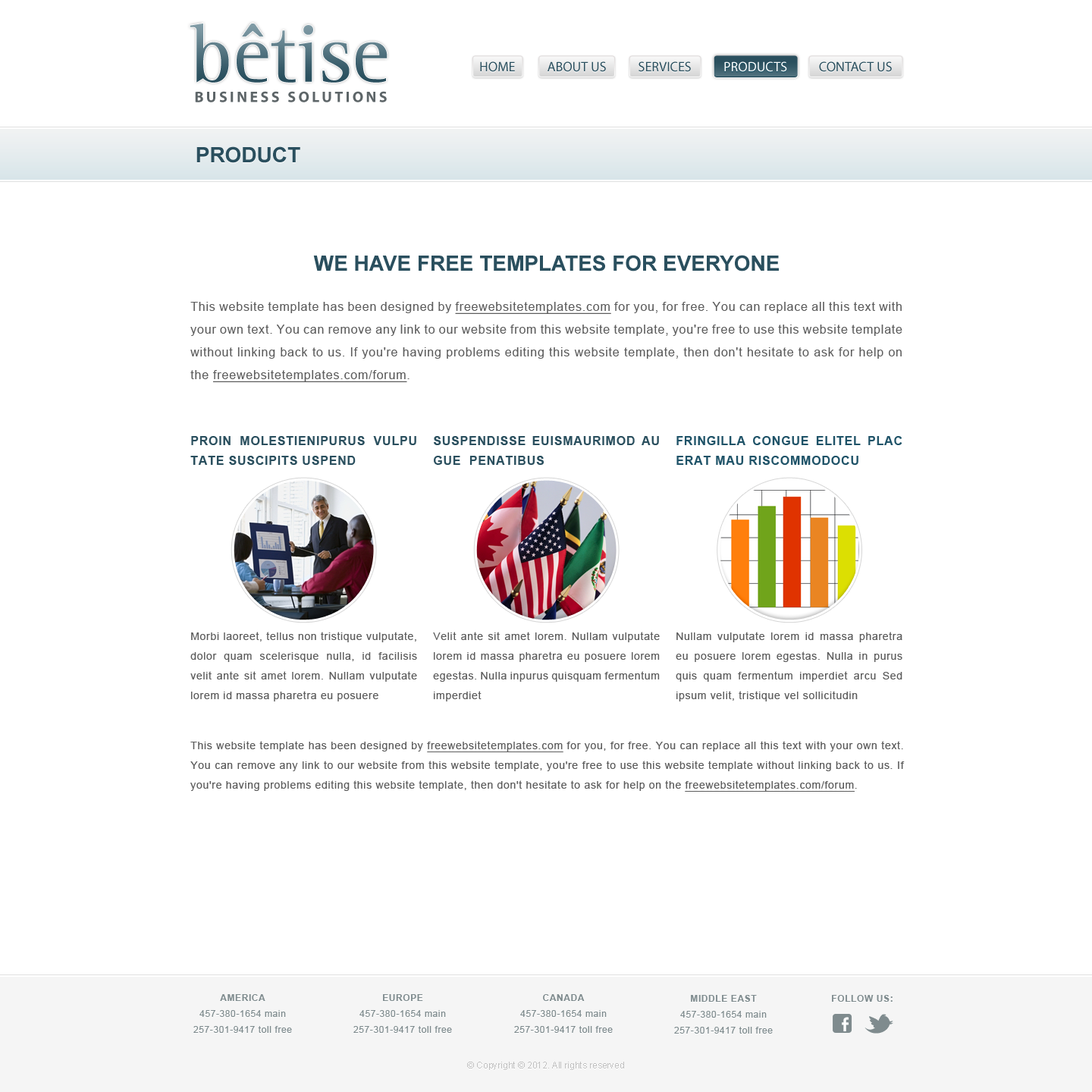
<style>
.page{position:relative;width:1092px;height:1092px;background:#ffffff}
.page>*{position:absolute;margin:0}
.t1{font:83.4px "LeftistMonoSerif"}
.t2{font:13.6px "MyriadPro-Regular";color:#2a4f5e}
.t3{font:13.6px "MyriadPro-Regular";color:#ffffff}
.t4{font:15.2px "MyriadPro-Bold";letter-spacing:0.17em;color:#5d6568;text-transform:uppercase}
.t5{font:21.2px "Arial-BoldMT";color:#2a4f5e;text-transform:uppercase}
.t6{font:12.1px/22.7px "ArialMT";letter-spacing:0.05em;color:#5d5d5d}
.t7{font:12.1px/22.7px "ArialMT";letter-spacing:0.05em;color:#5d5d5d;text-decoration:underline}
.t8{font:10.6px/19.7px "ArialMT";letter-spacing:0.05em;color:#5d5d5d}
.t9{font:12.1px/19.7px "Arial-BoldMT";letter-spacing:0.05em;color:#2a4f5e;text-transform:uppercase}
.t10{font:10.6px/19.7px "ArialMT";letter-spacing:0.05em;color:#5d5d5d;text-decoration:underline}
.t11{font:9.1px/15.9px "ArialMT";letter-spacing:0.05em;color:#818a8c}
.t12{font:9.1px/15.9px "Arial-BoldMT";letter-spacing:0.05em;color:#818a8c;text-transform:uppercase}
.t13{font:9.1px "Arial-BoldMT";letter-spacing:0.05em;color:#818a8c;text-transform:uppercase}
.t14{font:9.1px "ArialMT";color:#c1c1c1}
</style>
<div class="page">
<p class="t1" style="left:190px;top:24px;width:198px;height:59px">bêtise</p>
<p class="t2" style="left:480px;top:61px;width:412px;height:11px">HOME           ABOUT US           SERVICES                                            CONTACT US</p>
<p class="t3" style="left:724px;top:61px;width:63px;height:11px">PRODUCTS</p>
<p class="t4" style="left:195px;top:91px;width:192px;height:11px">Business Solutions</p>
<p class="t5" style="left:196px;top:146px;width:104px;height:17px">Product</p>
<p class="t5" style="left:313px;top:255px;width:466px;height:16px">We Have Free Templates for Everyone</p>
<p class="t6" style="left:190px;top:302px;width:712px;height:80px;text-align:justify">This website template has been designed by <span class="t7">freewebsitetemplates.com</span> for you, for free. You can replace all this text with your own text. You can remove any link to our website from this website template, you're free to use this website template without linking back to us. If you're having problems editing this website template, then don't hesitate to ask for help on the <span class="t7">freewebsitetemplates.com/forum</span>.</p>
<p class="t8" style="left:190px;top:436px;width:227px;height:265px;text-align:justify"><span class="t9">Proin molestienipurus vulpu tate suscipitS uspend<br><br><br><br><br><br><br></span>Morbi laoreet, tellus non tristique vulputate, dolor quam scelerisque nulla, id facilisis velit ante sit amet lorem. Nullam vulputate lorem id massa pharetra eu posuere</p>
<p class="t8" style="left:433px;top:436px;width:227px;height:265px;text-align:justify"><span class="t9">Suspendisse euisMaurimod au gue  penatibus <br><br><br><br><br><br><br></span>Velit ante sit amet lorem. Nullam vulputate lorem id massa pharetra eu posuere lorem egestas. Nulla inpurus quisquam fermentum imperdiet</p>
<p class="t8" style="left:676px;top:436px;width:226px;height:265px;text-align:justify"><span class="t9">fringilla congue elitel plac erat mau riscommodoCu<br><br><br><br><br><br><br></span>Nullam vulputate lorem id massa pharetra eu posuere lorem egestas. Nulla in purus quis quam fermentum imperdiet arcu Sed ipsum velit, tristique vel sollicitudin</p>
<p class="t8" style="left:190px;top:741px;width:715px;height:51px;text-align:justify">This website template has been designed by <span class="t10">freewebsitetemplates.com</span> for you, for free. You can replace all this text with your own text. You can remove any link to our website from this website template, you're free to use this website template without linking back to us. If you're having problems editing this website template, then don't hesitate to ask for help on the <span class="t10">freewebsitetemplates.com/forum</span>.</p>
<p class="t11" style="left:193px;top:994px;width:99px;height:39px;text-align:center"><span class="t12">America<br></span>457-380-1654 main<br>257-301-9417 toll free</p>
<p class="t11" style="left:353px;top:994px;width:99px;height:39px;text-align:center"><span class="t12">Europe<br></span>457-380-1654 main<br>257-301-9417 toll free</p>
<p class="t11" style="left:514px;top:994px;width:99px;height:39px;text-align:center"><span class="t12">Canada<br></span>457-380-1654 main<br>257-301-9417 toll free</p>
<p class="t11" style="left:674px;top:995px;width:99px;height:39px;text-align:center"><span class="t12">Middle East<br></span>457-380-1654 main<br>257-301-9417 toll free</p>
<p class="t13" style="left:832px;top:995px;width:61px;height:7px">Follow us:</p>
<p class="t14" style="left:467px;top:1062px;width:157px;height:8px">© Copyright © 2012. All rights reserved</p>
</div>
